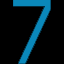
<style>
.page{position:relative;width:64px;height:64px;background:#000000}
.page>*{position:absolute;margin:0}
.t1{font:88px "MKSansTallX";color:#0a88ba}
</style>
<div class="page">
<p class="t1" style="left:13px;top:0px;width:38px;height:64px">7</p>
</div>
